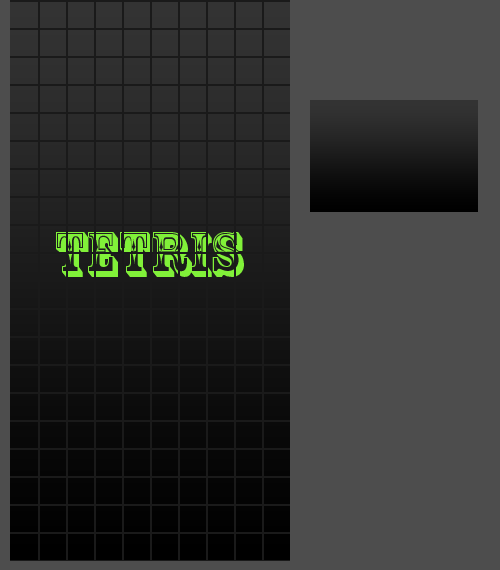
<style>
.page{position:relative;width:500px;height:570px;background:#4d4d4d}
.page>*{position:absolute;margin:0}
.t1{font:59.8px "RosewoodStd-Regular";color:#81f139}
</style>
<div class="page">
<p class="t1" style="left:56px;top:232px;width:188px;height:45px">Tetris</p>
</div>
